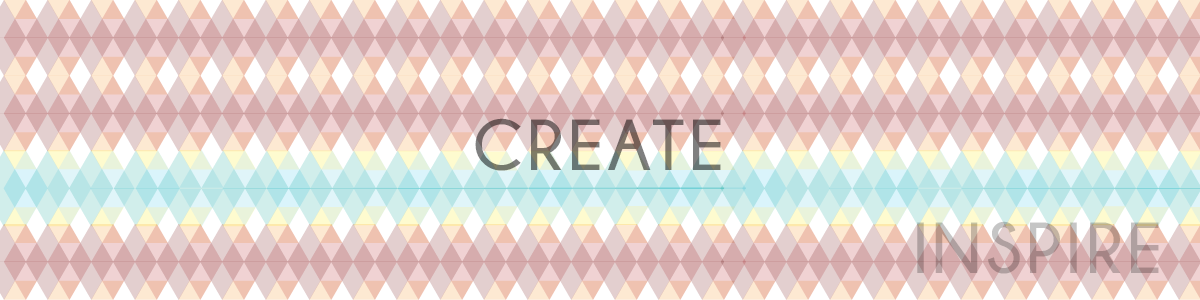
<style>
.page{position:relative;width:1200px;height:300px}
.page>*{position:absolute;margin:0}
.t1{font:72px "Champagne&Limousines-Bold";letter-spacing:0.06em;color:#747468}
.t2{font:72px "Champagne&Limousines-Bold";letter-spacing:0.06em}
</style>
<div class="page">
<p class="t1" style="left:475px;top:118px;width:246px;height:53px">CREATE</p>
<p class="t2" style="left:917px;top:221px;width:242px;height:53px">INSPIRE</p>
</div>
